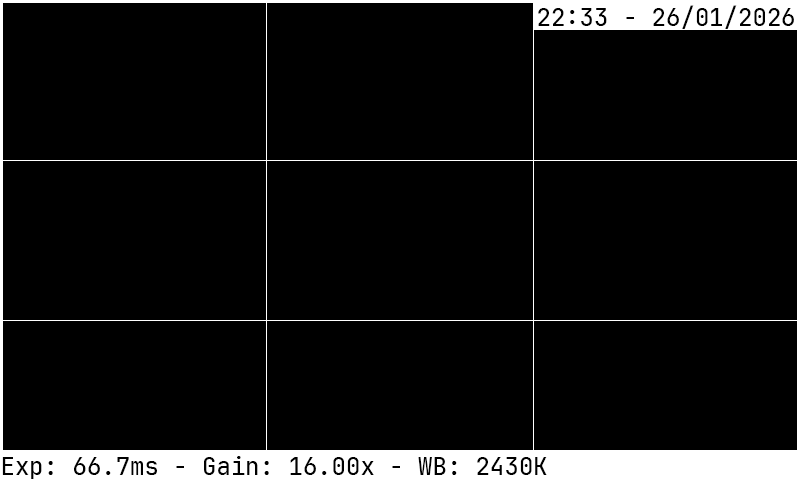
<style>
.page{position:relative;width:800px;height:480px;background:#000000}
.page>*{position:absolute;margin:0}
.t1{font:24px "JetBrainsMono-Medium";color:#000000}
</style>
<div class="page">
<p class="t1" style="left:538px;top:5px;width:256px;height:24px">22:33 - 26/01/2026</p>
<p class="t1" style="left:2px;top:456px;width:545px;height:23px">Exp: 66.7ms - Gain: 16.00x - WB: 2430K</p>
</div>
